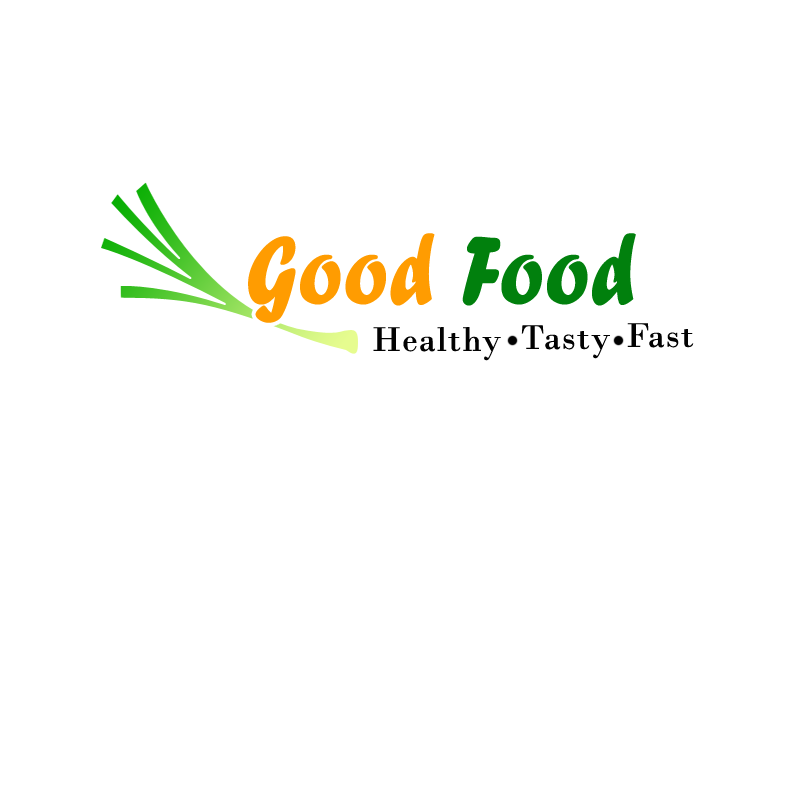
<style>
.page{position:relative;width:800px;height:800px;background:#ffffff}
.page>*{position:absolute;margin:0}
.t1{font:100px "ForteMT";color:#ff9c01;font-weight:bold;scale:0.8 1}
.t2{font:100px "ForteMT";color:#01800d;font-weight:bold;scale:0.8 1}
.t3{font:36px "BodoniMT";letter-spacing:0.025em;color:#020202}
</style>
<div class="page">
<p class="t1" style="left:248px;top:233px;width:388px;height:90px">Good <span class="t2">Food</span></p>
<p class="t3" style="left:373px;top:327px;width:128px;height:34px">Healthy</p>
<p class="t3" style="left:521px;top:325px;width:89px;height:34px">Tasty</p>
<p class="t3" style="left:627px;top:323px;width:67px;height:25px">Fast</p>
</div>
